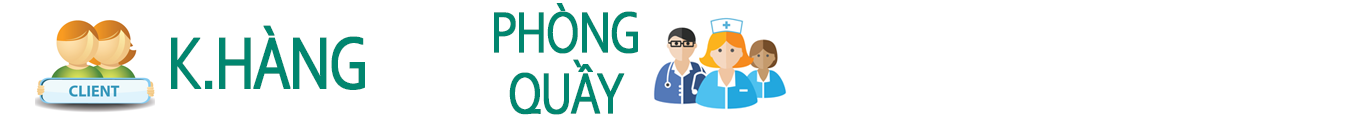
<style>
.page{position:relative;width:1366px;height:120px;background:#ffffff}
.page>*{position:absolute;margin:0}
.t1{font:60.7px "Corbel";letter-spacing:-0.06em;color:#01866f;font-weight:bold;scale:0.77 1}
.t2{font:77.4px "Corbel";letter-spacing:-0.06em;color:#01866f;font-weight:bold;scale:0.77 1}
</style>
<div class="page">
<p class="t1" style="left:494px;top:3px;width:144px;height:112px;text-align:center">PHÒNG<br>QUẦY</p>
<p class="t2" style="left:171px;top:25px;width:194px;height:65px">K.HÀNG</p>
</div>
